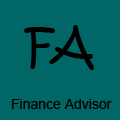
<style>
.page{position:relative;width:120px;height:120px;background:#006666}
.page>*{position:absolute;margin:0}
.t1{font:48px "KristenITC-Regular";color:#000000}
.t2{font:14px "ArialMT";color:#000000}
</style>
<div class="page">
<p class="t1" style="left:24px;top:25px;width:70px;height:45px">FA</p>
<p class="t2" style="left:12px;top:99px;width:100px;height:10px">Finance Advisor</p>
</div>
